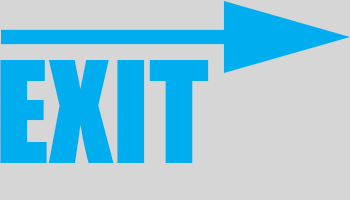
<style>
.page{position:relative;width:350px;height:200px;background:#d6d6d6}
.page>*{position:absolute;margin:0}
.t1{font:130px "Impact";color:#00aeef}
</style>
<div class="page">
<p class="t1" style="left:0px;top:60px;width:209px;height:103px">EXIT</p>
</div>
